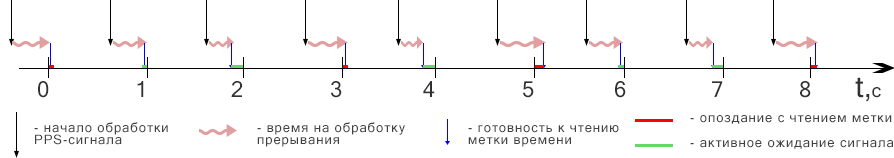
<style>
.page{position:relative;width:894px;height:158px;background:#ffffff}
.page>*{position:absolute;margin:0}
.t1{font:30px "MicrosoftSansSerif";color:#313131}
.t2{font:19px "MicrosoftSansSerif";color:#313131}
.t3{font:22px "MicrosoftSansSerif";color:#313131}
.t4{font:13px/12px "MicrosoftSansSerif";letter-spacing:0.075em;color:#414141}
.t5{font:13px "MicrosoftSansSerif";letter-spacing:0.075em;color:#414141}
</style>
<div class="page">
<p class="t1" style="left:855px;top:77px;width:26px;height:25px">t,<span class="t2">c</span></p>
<p class="t3" style="left:38px;top:81px;width:11px;height:17px">0</p>
<p class="t3" style="left:137px;top:81px;width:7px;height:16px">1</p>
<p class="t3" style="left:231px;top:81px;width:11px;height:16px">2</p>
<p class="t3" style="left:331px;top:81px;width:11px;height:17px">3</p>
<p class="t3" style="left:423px;top:81px;width:12px;height:16px">4</p>
<p class="t3" style="left:523px;top:81px;width:11px;height:17px">5</p>
<p class="t3" style="left:615px;top:81px;width:11px;height:17px">6</p>
<p class="t3" style="left:712px;top:81px;width:11px;height:16px">7</p>
<p class="t3" style="left:800px;top:81px;width:11px;height:17px">8</p>
<p class="t4" style="left:34px;top:122px;width:134px;height:23px">- начало обработки<br>PPS-сигнала</p>
<p class="t4" style="left:257px;top:122px;width:148px;height:25px">- время на обработку<br>прерывания</p>
<p class="t4" style="left:468px;top:125px;width:151px;height:22px">- готовность к чтению<br>метки времени</p>
<p class="t5" style="left:690px;top:115px;width:202px;height:9px">- опоздание с чтением метки</p>
<p class="t5" style="left:690px;top:140px;width:203px;height:9px">- активное ожидание сигнала</p>
</div>
